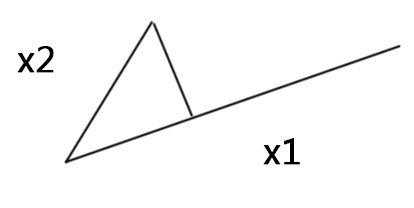
<style>
.page{position:relative;width:414px;height:208px;background:#ffffff}
.page>*{position:absolute;margin:0}
.t1{font:37px "MicrosoftTaiLe";color:#000000;font-weight:bold}
</style>
<div class="page">
<p class="t1" style="left:17px;top:46px;width:37px;height:27px">x2</p>
<p class="t1" style="left:263px;top:138px;width:37px;height:27px">x1</p>
</div>
